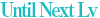
<style>
.page{position:relative;width:100px;height:18px;background:#ffffff}
.page>*{position:absolute;margin:0}
.t1{font:20px "RyuminPro-ExBold";letter-spacing:-0.12em;color:#1cbdc0}
</style>
<div class="page">
<p class="t1" style="left:0px;top:2px;width:98px;height:15px">Until Next Lv</p>
</div>
